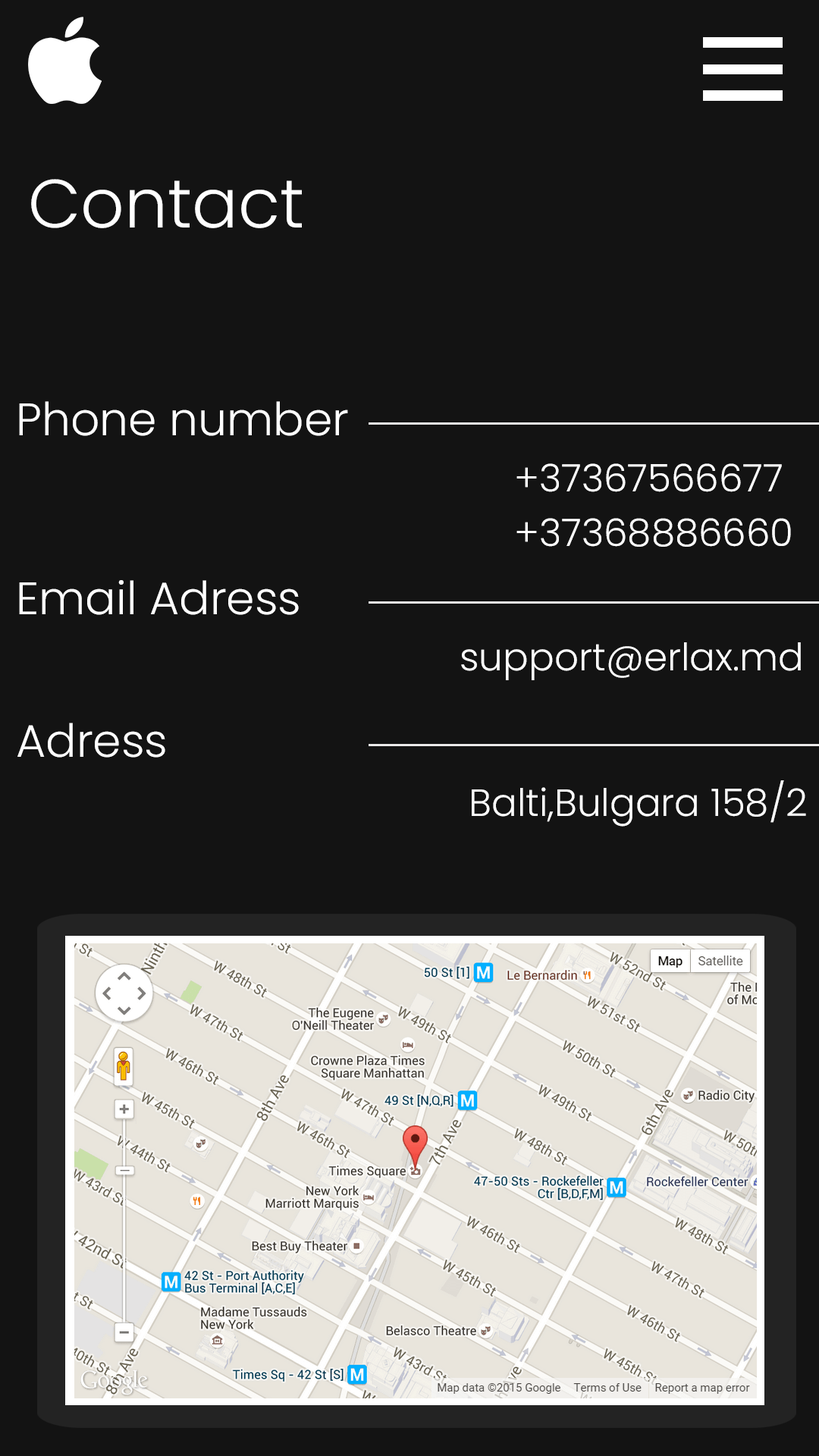
<style>
.page{position:relative;width:819px;height:1456px;background:#131313}
.page>*{position:absolute;margin:0}
.t1{font:68.2px "Poppins-Light";color:#ffffff}
.t2{font:45.5px "Poppins-Light";color:#ffffff}
.t3{font:37.9px "Poppins-Light";color:#ffffff}
</style>
<div class="page">
<p class="t1" style="left:31px;top:179px;width:271px;height:49px">Contact</p>
<p class="t2" style="left:19px;top:401px;width:329px;height:35px">Phone number</p>
<p class="t3" style="left:516px;top:463px;width:266px;height:29px">+37367566677</p>
<p class="t3" style="left:516px;top:518px;width:275px;height:29px">+37368886660</p>
<p class="t2" style="left:19px;top:580px;width:280px;height:35px">Email Adress</p>
<p class="t3" style="left:461px;top:642px;width:340px;height:38px">support@erlax.md</p>
<p class="t2" style="left:17px;top:723px;width:148px;height:35px">Adress</p>
<p class="t3" style="left:472px;top:780px;width:334px;height:47px">Balti,Bulgara 158/2</p>
</div>
